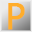
<style>
.page{position:relative;width:32px;height:32px}
.page>*{position:absolute;margin:0}
.t1{font:36px "SegoeUI";letter-spacing:-0.05em;color:#ffad2b;text-transform:uppercase;font-weight:bold}
</style>
<div class="page">
<p class="t1" style="left:8px;top:3px;width:17px;height:27px">P</p>
</div>
